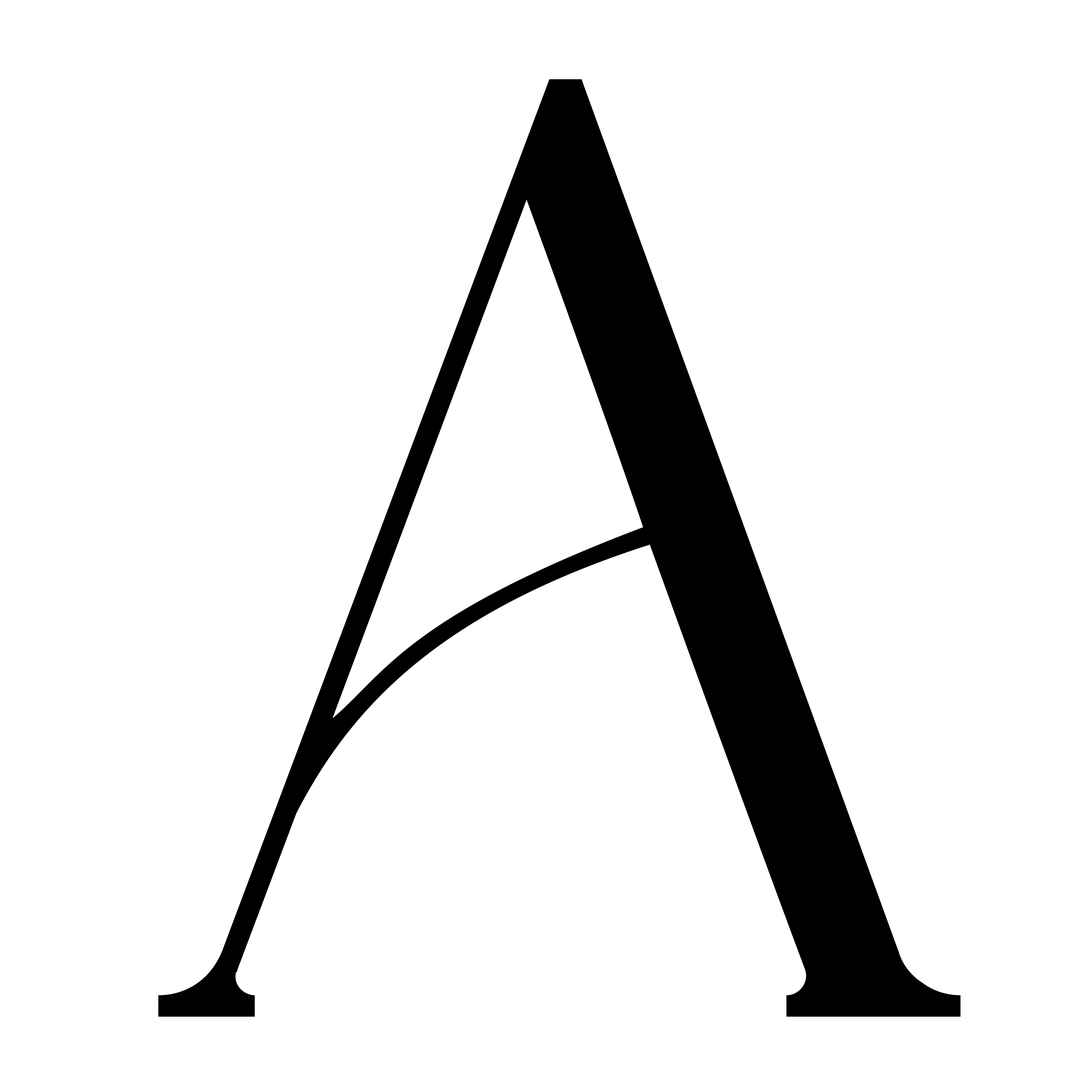
<style>
.page{position:relative;width:1092px;height:1092px;background:#ffffff}
.page>*{position:absolute;margin:0}
.t1{font:1339.1px "Fernstad-Regular";color:#000000}
</style>
<div class="page">
<p class="t1" style="left:158px;top:79px;width:803px;height:938px">A</p>
</div>
